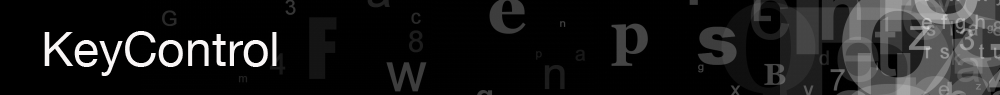
<style>
.page{position:relative;width:1000px;height:95px;background:#000000}
.page>*{position:absolute;margin:0}
.t1{font:48px "HelveticaNeue";color:#f9f6f6}
</style>
<div class="page">
<p class="t1" style="left:44px;top:31px;width:233px;height:45px">KeyControl</p>
</div>
